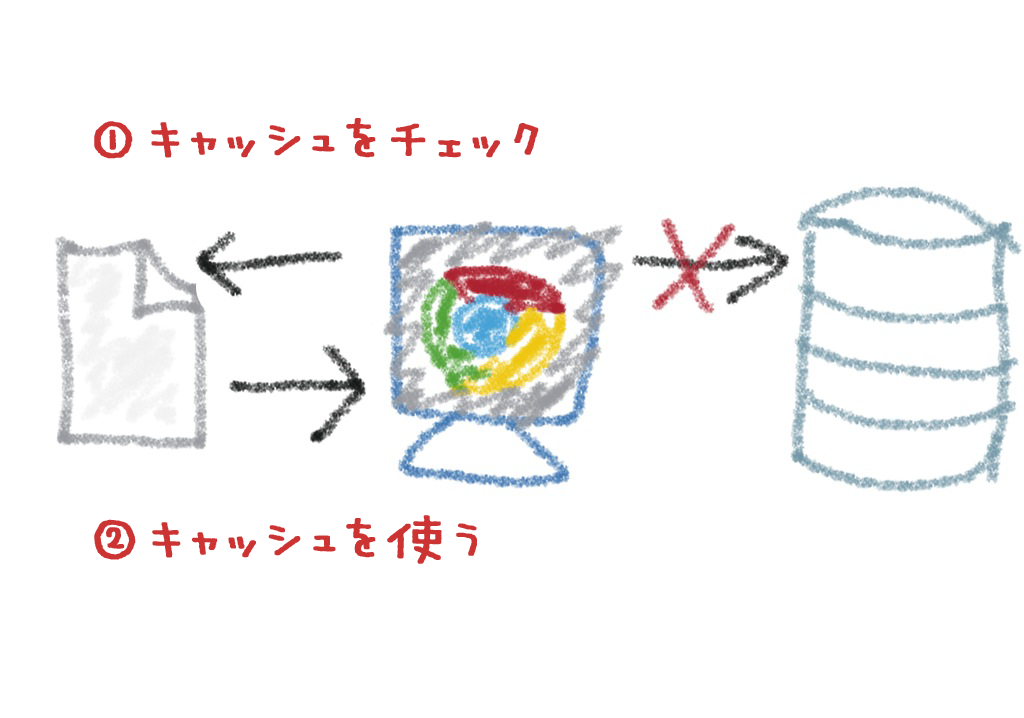
<style>
.page{position:relative;width:1024px;height:718px;background:#ffffff}
.page>*{position:absolute;margin:0}
.t1{font:80px "MiuraLiner-Jr";color:#cc3434;font-weight:bold}
</style>
<div class="page">
<p class="t1" style="left:94px;top:118px;width:445px;height:41px">①キャッシュをチェック</p>
<p class="t1" style="left:94px;top:515px;width:383px;height:49px">②キャッシュを使う</p>
</div>
